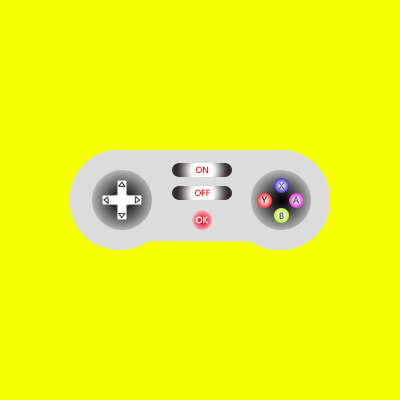
<style>
.page{position:relative;width:400px;height:400px;background:#f6ff00}
.page>*{position:absolute;margin:0}
.t1{font:8.3px "MicrosoftYaHei";color:#ff0000}
.t2{font:8.3px "MicrosoftYaHei"}
.t3{font:8.3px "MicrosoftYaHei";color:#ffffff}
</style>
<div class="page">
<p class="t1" style="left:195px;top:166px;width:14px;height:8px">ON</p>
<p class="t2" style="left:278px;top:182px;width:6px;height:8px">X</p>
<p class="t2" style="left:194px;top:189px;width:16px;height:8px">OFF</p>
<p class="t2" style="left:261px;top:196px;width:6px;height:8px">Y</p>
<p class="t2" style="left:293px;top:196px;width:6px;height:8px">A</p>
<p class="t3" style="left:196px;top:216px;width:12px;height:8px">OK</p>
<p class="t2" style="left:279px;top:212px;width:5px;height:8px">B</p>
</div>
